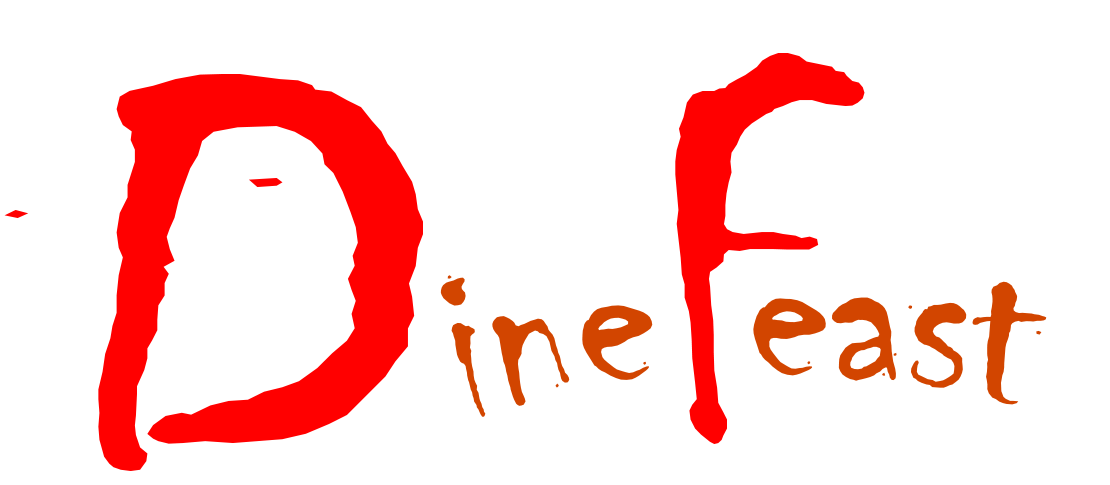
<style>
.page{position:relative;width:1110px;height:485px;background:#ffffff}
.page>*{position:absolute;margin:0}
.t1{font:497.1px "Chiller-Regular";color:#ff0000;scale:1.16 1}
.t2{font:653.4px "Chiller-Regular";color:#ff0000;scale:1.63 1}
.t3{font:250px "Chiller-Regular";color:#d24500}
</style>
<div class="page">
<p class="t1" style="left:675px;top:53px;width:190px;height:391px">F</p>
<p class="t2" style="left:4px;top:74px;width:419px;height:397px">D</p>
<p class="t3" style="left:440px;top:275px;width:213px;height:142px;rotate:-9deg">ine</p>
<p class="t3" style="left:753px;top:281px;width:294px;height:124px;rotate:4deg">east</p>
</div>
